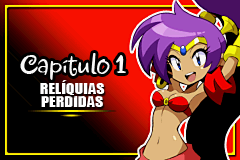
<style>
.page{position:relative;width:240px;height:160px;background:#000000}
.page>*{position:absolute;margin:0}
.t1{font:32px "Jewels";color:#f8f8f8;scale:0.95 1}
.t2{font:14.2px "Impact";color:#ffffff;scale:1.13 1}
</style>
<div class="page">
<p class="t1" style="left:20px;top:53px;width:106px;height:27px">Capítulo 1</p>
<p class="t2" style="left:40px;top:80px;width:65px;height:15px">RELÍQUIAS</p>
<p class="t2" style="left:41px;top:96px;width:62px;height:11px">PERDIDAS</p>
</div>
